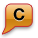
<style>
.page{position:relative;width:38px;height:38px;background:#ffffff}
.page>*{position:absolute;margin:0}
.t1{font:15.9px "HelveticaNeue-Bold";color:#000000}
</style>
<div class="page">
<p class="t1" style="left:13px;top:8px;width:12px;height:13px">C</p>
</div>
